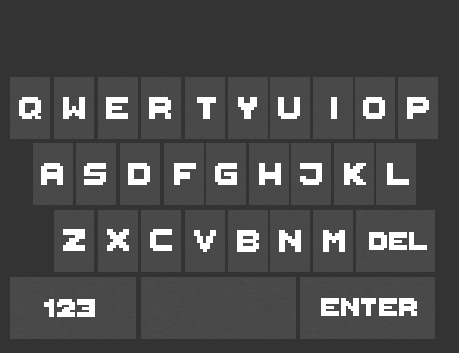
<style>
.page{position:relative;width:459px;height:353px;background:#333333}
.page>*{position:absolute;margin:0}
.t1{font:50px "ThaleahFat";color:#ffffff}
.t2{font:40px "ThaleahFat";color:#ffffff}
</style>
<div class="page">
<p class="t1" style="left:19px;top:97px;width:22px;height:22px">q</p>
<p class="t1" style="left:63px;top:97px;width:22px;height:22px">w</p>
<p class="t1" style="left:106px;top:97px;width:22px;height:22px">e</p>
<p class="t1" style="left:149px;top:97px;width:22px;height:22px">r</p>
<p class="t1" style="left:197px;top:97px;width:19px;height:22px">t</p>
<p class="t1" style="left:238px;top:97px;width:19px;height:22px">y</p>
<p class="t1" style="left:278px;top:97px;width:22px;height:22px">u</p>
<p class="t1" style="left:363px;top:97px;width:22px;height:22px">o</p>
<p class="t1" style="left:407px;top:97px;width:22px;height:22px">p</p>
<p class="t1" style="left:41px;top:163px;width:22px;height:22px">a</p>
<p class="t1" style="left:84px;top:163px;width:22px;height:22px">s</p>
<p class="t1" style="left:128px;top:163px;width:22px;height:22px">d</p>
<p class="t1" style="left:174px;top:163px;width:22px;height:22px">f</p>
<p class="t1" style="left:215px;top:163px;width:22px;height:22px">g</p>
<p class="t1" style="left:259px;top:163px;width:22px;height:22px">h</p>
<p class="t1" style="left:300px;top:163px;width:22px;height:22px">j</p>
<p class="t1" style="left:344px;top:163px;width:22px;height:22px">k</p>
<p class="t1" style="left:387px;top:163px;width:22px;height:22px">l</p>
<p class="t1" style="left:63px;top:229px;width:22px;height:22px">z</p>
<p class="t1" style="left:107px;top:229px;width:22px;height:22px">x</p>
<p class="t1" style="left:150px;top:229px;width:22px;height:22px">c</p>
<p class="t1" style="left:194px;top:230px;width:22px;height:22px">v</p>
<p class="t1" style="left:237px;top:230px;width:22px;height:22px">b</p>
<p class="t1" style="left:279px;top:230px;width:22px;height:22px">n</p>
<p class="t1" style="left:323px;top:230px;width:22px;height:22px">m</p>
<p class="t2" style="left:369px;top:232px;width:58px;height:18px">del</p>
<p class="t2" style="left:44px;top:299px;width:51px;height:18px">123</p>
<p class="t2" style="left:321px;top:298px;width:96px;height:18px">enter</p>
</div>
